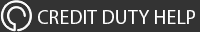
<style>
.page{position:relative;width:200px;height:32px;background:#333333}
.page>*{position:absolute;margin:0}
.t1{font:20px "MyriadPro-Regular";color:#ffffff}
</style>
<div class="page">
<p class="t1" style="left:38px;top:10px;width:157px;height:14px">CREDIT DUTY HELP</p>
</div>
